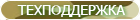
<style>
.page{position:relative;width:140px;height:20px}
.page>*{position:absolute;margin:0}
.t1{font:14px "Tahoma";letter-spacing:-0.005em;color:#ffffff}
</style>
<div class="page">
<p class="t1" style="left:17px;top:5px;width:108px;height:12px">ТЕХПОДДЕРЖКА</p>
</div>
